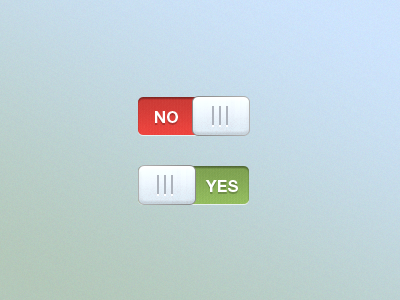
<style>
.page{position:relative;width:400px;height:300px}
.page>*{position:absolute;margin:0}
.t1{font:16px "HelveticaNeue-Bold";letter-spacing:0.025em;color:#ffffff}
</style>
<div class="page">
<p class="t1" style="left:155px;top:111px;width:23px;height:12px">NO</p>
<p class="t1" style="left:205px;top:180px;width:33px;height:12px">YES</p>
</div>
